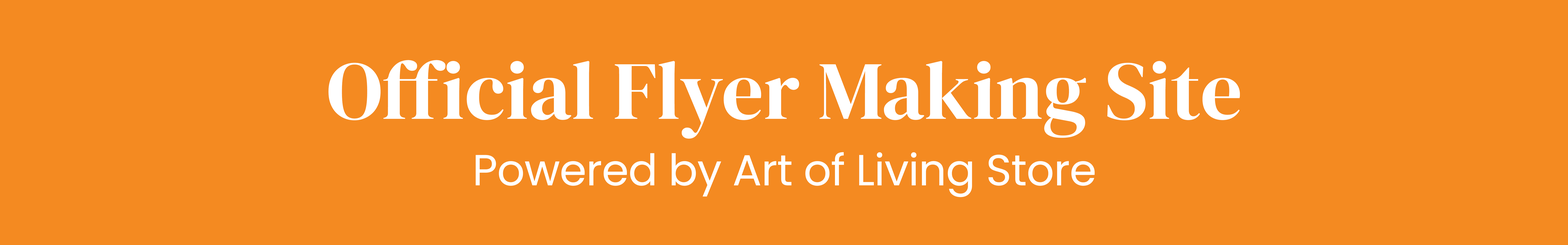
<style>
.page{position:relative;width:1568px;height:245px;background:#f48a21}
.page>*{position:absolute;margin:0}
.t1{font:82.5px "DMSerifDisplay-Regular";color:#ffffff}
.t2{font:43.4px "Poppins-Regular";letter-spacing:-0.01em;color:#ffffff}
</style>
<div class="page">
<p class="t1" style="left:328px;top:60px;width:912px;height:79px">Official Flyer Making Site</p>
<p class="t2" style="left:476px;top:152px;width:619px;height:45px">Powered by Art of Living Store</p>
</div>
